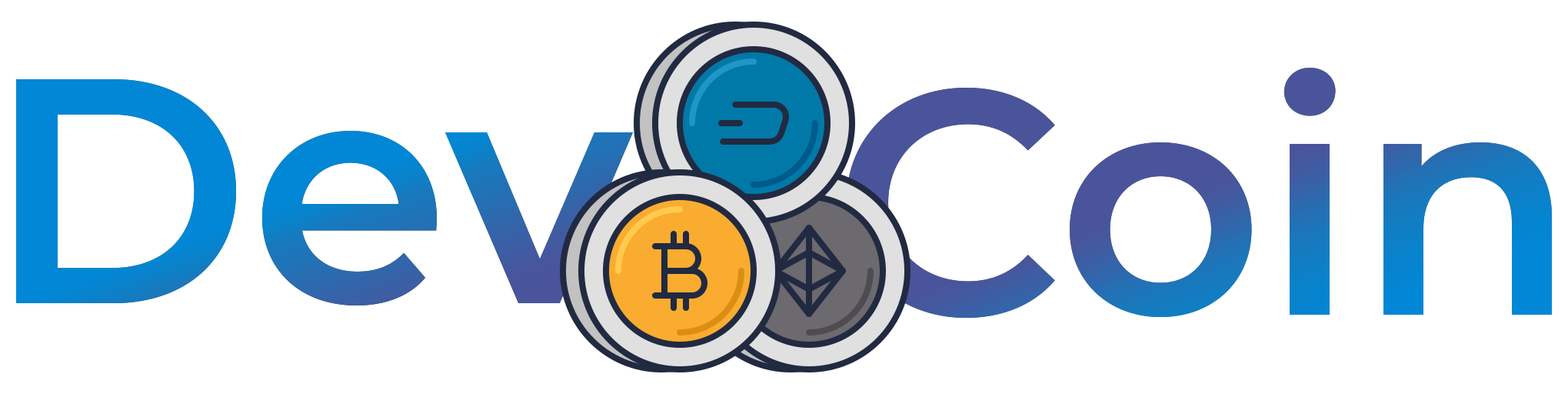
<style>
.page{position:relative;width:1568px;height:394px;background:#ffffff}
.page>*{position:absolute;margin:0}
.t1{font:319.8px "Montserrat-SemiBold"}
</style>
<div class="page">
<p class="t1" style="left:846px;top:68px;width:706px;height:250px">Coin</p>
<p class="t1" style="left:16px;top:79px;width:617px;height:226px">Dev</p>
</div>
